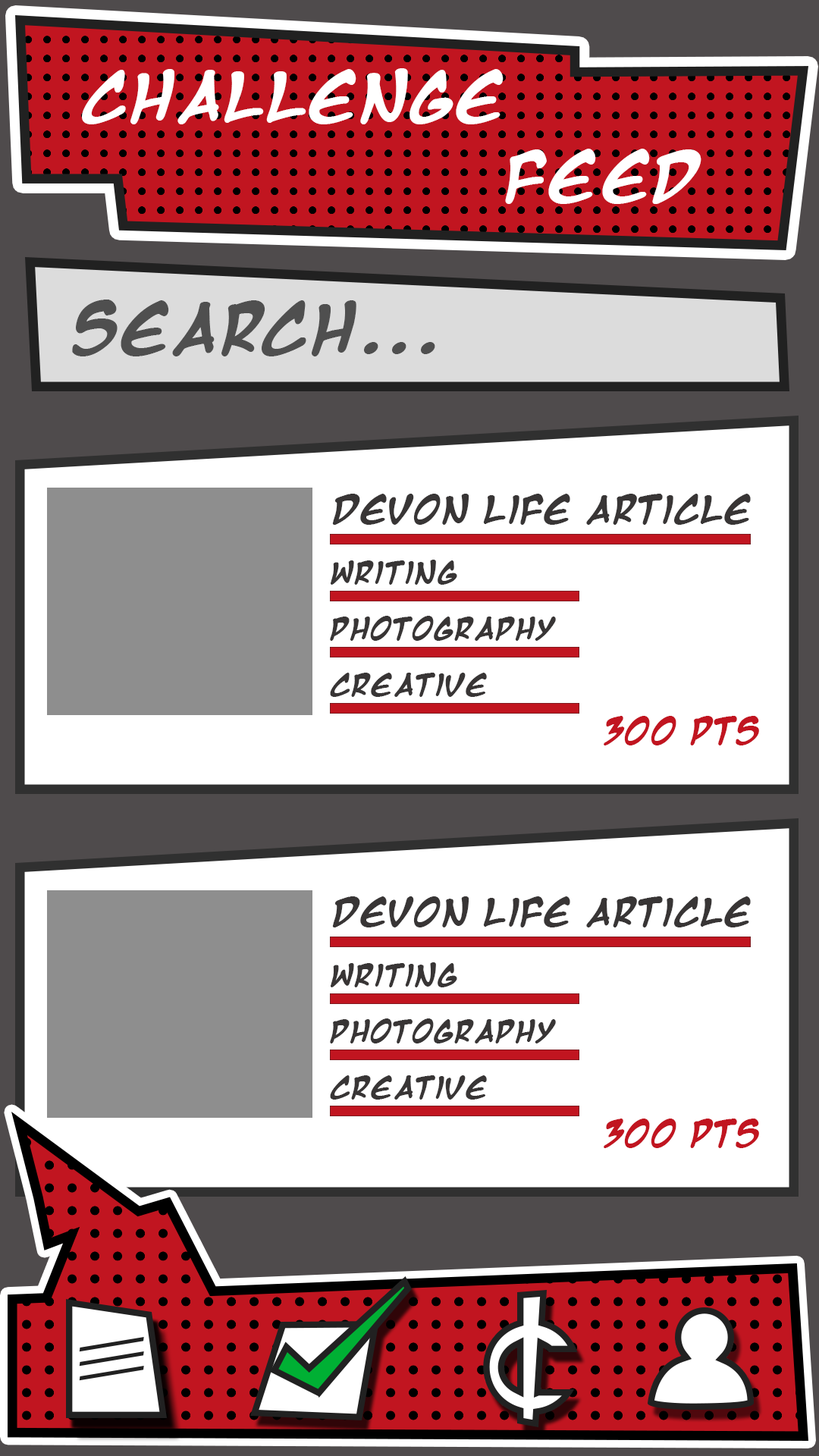
<style>
.page{position:relative;width:819px;height:1456px;background:#ffffff}
.page>*{position:absolute;margin:0}
.t1{font:57.1px "MangaTempleBold";color:#ffffff}
.t2{font:58.4px "MangaTempleBold";color:#4f4f4f}
.t3{font:31.6px "MangaTempleBold";color:#383535}
.t4{font:25.3px "MangaTempleBold";color:#383535}
.t5{font:29.8px "MangaTempleBold";color:#c11520}
</style>
<div class="page">
<p class="t1" style="left:82px;top:68px;width:422px;height:56px">CHallenge</p>
<p class="t1" style="left:505px;top:149px;width:196px;height:55px">Feed</p>
<p class="t2" style="left:72px;top:300px;width:363px;height:56px">Search...</p>
<p class="t3" style="left:332px;top:494px;width:419px;height:31px">Devon Life Article</p>
<p class="t4" style="left:331px;top:560px;width:126px;height:25px">Writing</p>
<p class="t4" style="left:330px;top:616px;width:226px;height:25px">PHotography</p>
<p class="t4" style="left:330px;top:673px;width:157px;height:24px">Creative</p>
<p class="t5" style="left:604px;top:716px;width:155px;height:29px">300 pts</p>
<p class="t3" style="left:332px;top:896px;width:419px;height:31px">Devon Life Article</p>
<p class="t4" style="left:331px;top:962px;width:126px;height:25px">Writing</p>
<p class="t4" style="left:330px;top:1018px;width:226px;height:25px">PHotography</p>
<p class="t4" style="left:330px;top:1075px;width:157px;height:25px">Creative</p>
<p class="t5" style="left:604px;top:1119px;width:155px;height:29px">300 pts</p>
</div>
